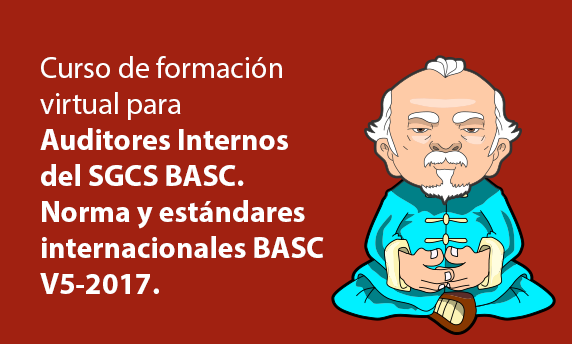
<style>
.page{position:relative;width:572px;height:344px;background:#a12111}
.page>*{position:absolute;margin:0}
.t1{font:30px "MyriadPro-Bold";color:#ffffff}
.t2{font:30px "MyriadPro-Regular";color:#ffffff}
</style>
<div class="page">
<p class="t1" style="left:40px;top:56px;width:284px;height:238px"><span class="t2">Curso de formación virtual para<br></span>Auditores Internos del SGCS BASC.<br>Norma y estándares internacionales BASC V5-2017.</p>
</div>
